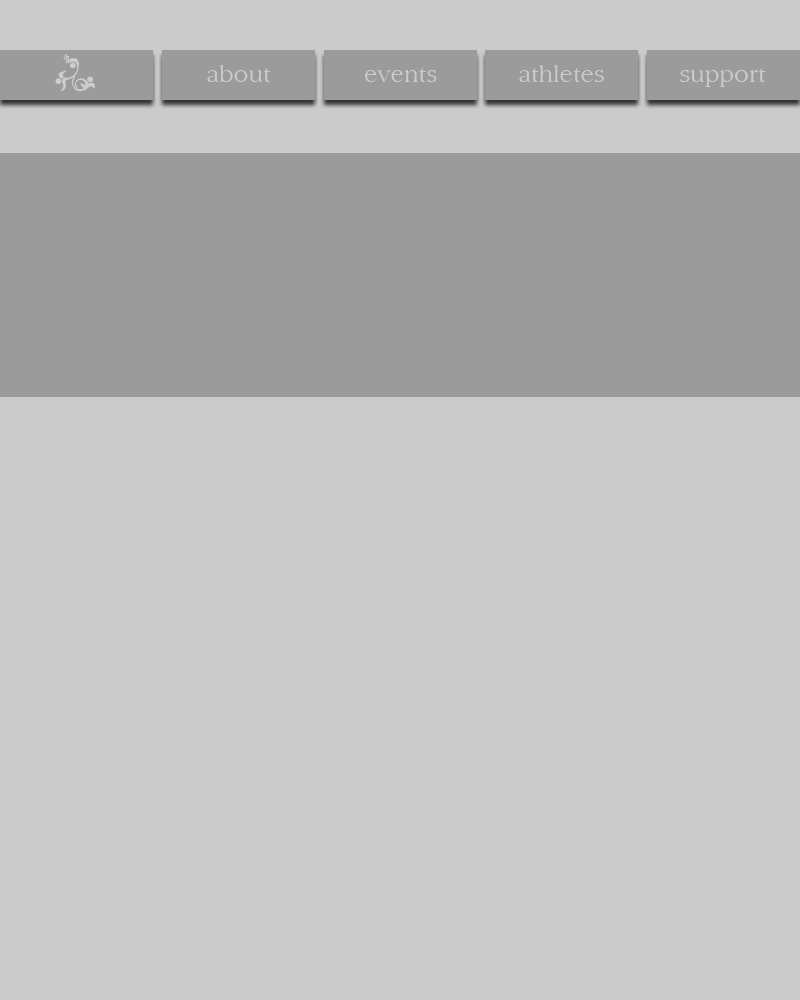
<style>
.page{position:relative;width:800px;height:1000px;background:#cbcbcb}
.page>*{position:absolute;margin:0}
.t1{font:25px "SanfordBook";color:#cbcbcb}
</style>
<div class="page">
<p class="t1" style="left:207px;top:65px;width:64px;height:17px">about</p>
<p class="t1" style="left:519px;top:65px;width:85px;height:17px">athletes</p>
<p class="t1" style="left:365px;top:68px;width:72px;height:14px">events</p>
<p class="t1" style="left:680px;top:68px;width:86px;height:19px">support</p>
</div>
